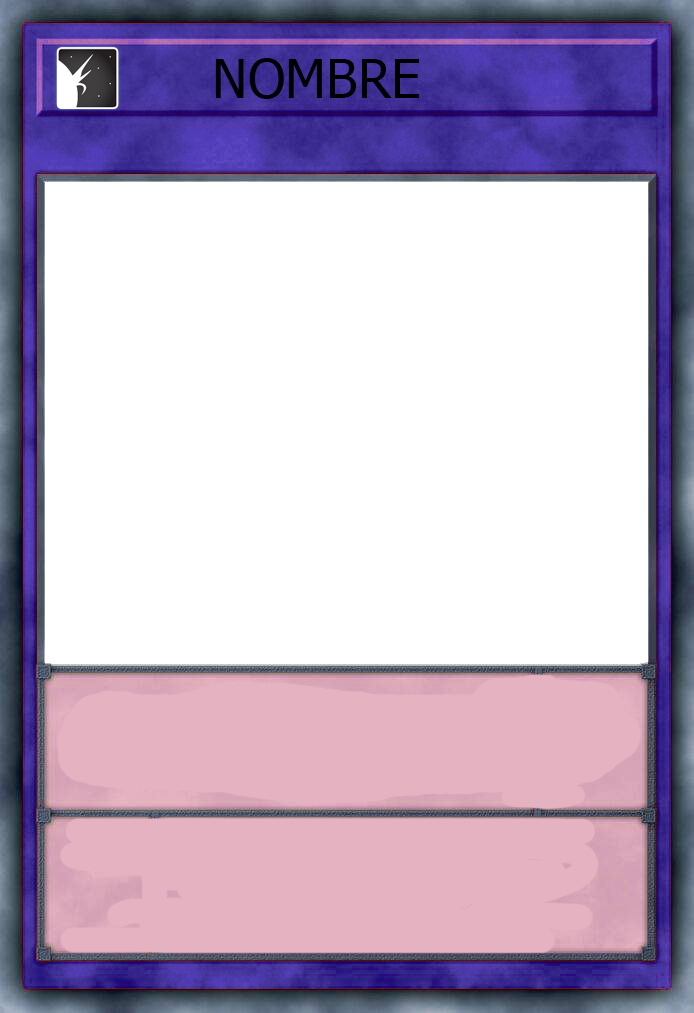
<style>
.page{position:relative;width:694px;height:1013px;background:#ffffff}
.page>*{position:absolute;margin:0}
.t1{font:53.8px "Tahoma";color:#000000}
</style>
<div class="page">
<p class="t1" style="left:215px;top:58px;width:204px;height:41px">NOMBRE</p>
</div>
